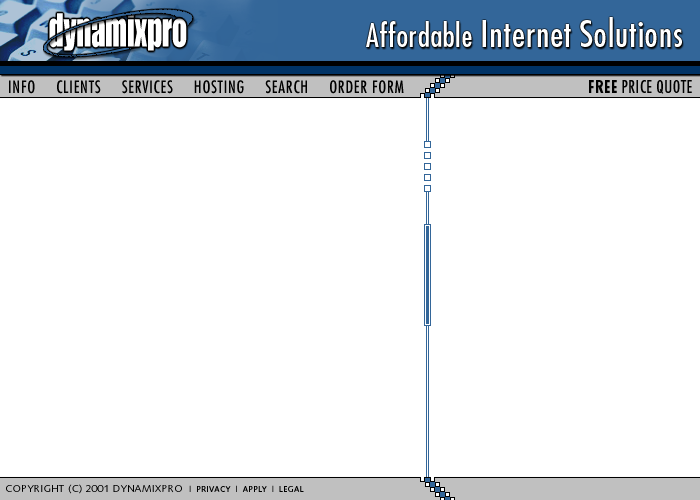
<style>
.page{position:relative;width:700px;height:500px;background:#ffffff}
.page>*{position:absolute;margin:0}
.t1{font:35.4px "Futura-Condensed";letter-spacing:0.02em;color:#ffffff}
.t2{font:31.2px "Futura-Condensed";letter-spacing:0.02em;color:#ffffff}
.t3{font:16.7px "Futura-Condensed";letter-spacing:0.04em;color:#000000}
.t4{font:16.7px "Futura-Condensed";letter-spacing:0.02em;color:#000000}
.t5{font:16.7px "Futura-CondensedBold";letter-spacing:0.02em;color:#000000}
.t6{font:8.3px "Syntax-Bold";letter-spacing:0.02em;color:#000000}
.t7{font:10.4px "Syntax-Roman";letter-spacing:0.02em;color:#000000}
</style>
<div class="page">
<p class="t1" style="left:366px;top:17px;width:316px;height:30px"><span class="t2">Affordable </span>Internet Solutions</p>
<p class="t3" style="left:9px;top:80px;width:395px;height:14px">INFO     CLIENTS     SERVICES     HOSTING     SEARCH     ORDER FORM</p>
<p class="t4" style="left:589px;top:80px;width:103px;height:14px"><span class="t5">FREE</span> PRICE QUOTE</p>
<p class="t6" style="left:6px;top:484px;width:298px;height:10px"><span class="t7">COPYRIGHT (C) 2001 DYNAMIXPRO  </span>|  PRIVACY  |  APPLY  |  LEGAL</p>
</div>
